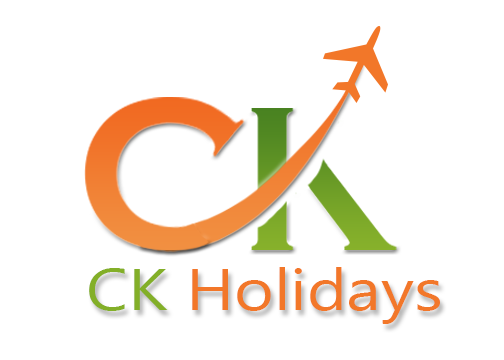
<style>
.page{position:relative;width:504px;height:360px;background:#ffffff}
.page>*{position:absolute;margin:0}
.t1{font:58.3px "MicrosoftNewTaiLue";color:#f27729;scale:1.16 1}
.t2{font:58.3px "MicrosoftNewTaiLue";color:#83af28;scale:1.16 1}
</style>
<div class="page">
<p class="t1" style="left:89px;top:267px;width:351px;height:57px"><span class="t2">CK </span>Holidays</p>
</div>
